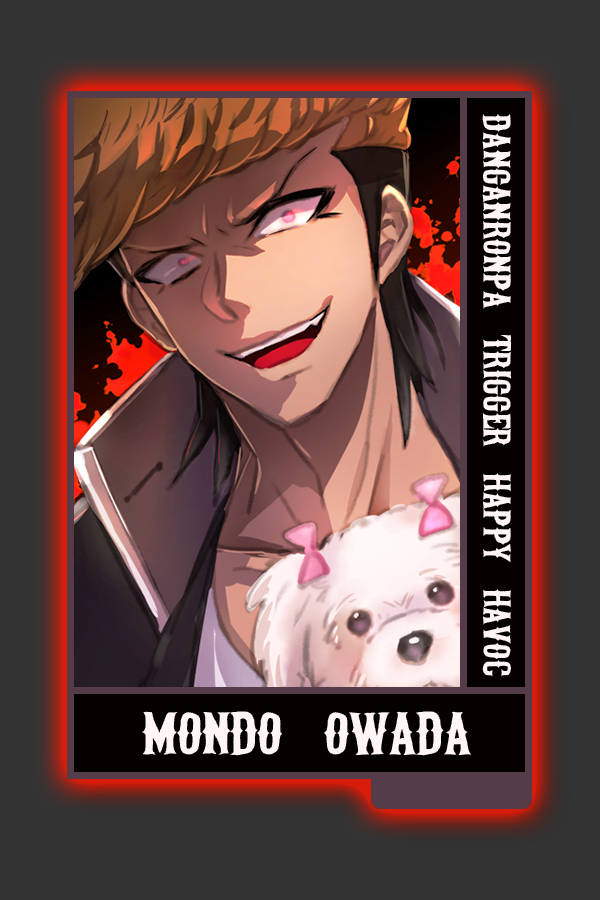
<style>
.page{position:relative;width:600px;height:900px;background:#333333}
.page>*{position:absolute;margin:0}
.t1{font:39.9px "Helltown";color:#fff5f4}
.t2{font:61.9px "Helltown";color:#fff5f4}
</style>
<div class="page">
<p class="t1" style="left:482px;top:114px;width:30px;height:563px;rotate:90deg">DANGANRONPA TRIGGER HAPPY HAVOC</p>
<p class="t2" style="left:142px;top:711px;width:330px;height:45px">MONDO OWADA</p>
</div>
